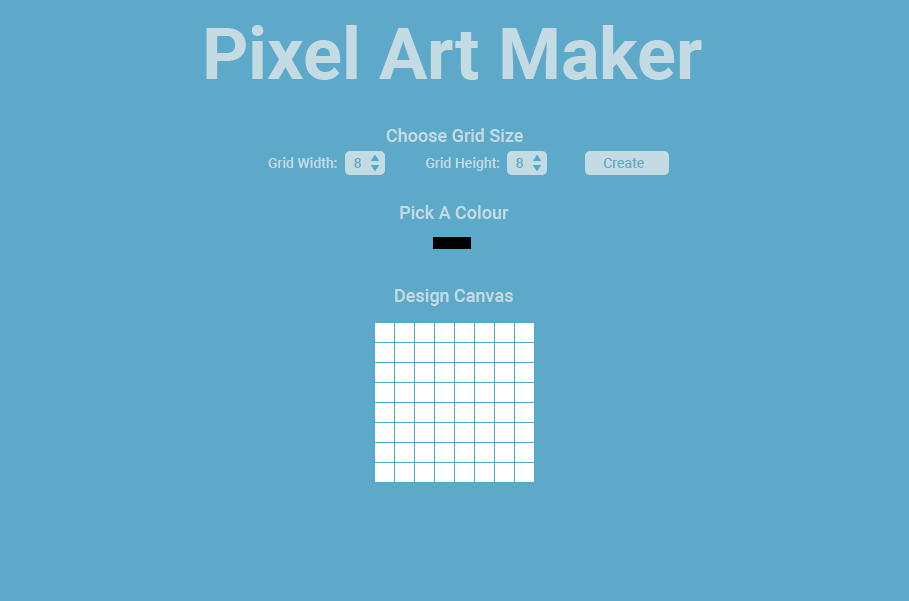
<style>
.page{position:relative;width:909px;height:601px;background:#5da9ca}
.page>*{position:absolute;margin:0}
.t1{font:72px "Roboto-Bold";color:#c4dbe3}
.t2{font:18px "Roboto-Medium";color:#c4dbe3}
.t3{font:14px "Roboto-Medium";color:#c4dbe3}
.t4{font:14px "Roboto-Medium";color:#65a9c7}
</style>
<div class="page">
<p class="t1" style="left:206px;top:25px;width:496px;height:55px">Pixel Art Maker</p>
<p class="t2" style="left:386px;top:128px;width:137px;height:14px">Choose Grid Size</p>
<p class="t3" style="left:268px;top:157px;width:69px;height:11px">Grid Width:</p>
<p class="t4" style="left:354px;top:158px;width:7px;height:10px">8</p>
<p class="t3" style="left:426px;top:157px;width:74px;height:14px">Grid Height:</p>
<p class="t4" style="left:516px;top:158px;width:7px;height:10px">8</p>
<p class="t4" style="left:603px;top:158px;width:41px;height:10px">Create</p>
<p class="t2" style="left:400px;top:205px;width:109px;height:14px">Pick A Colour</p>
<p class="t2" style="left:395px;top:289px;width:118px;height:17px">Design Canvas</p>
</div>
